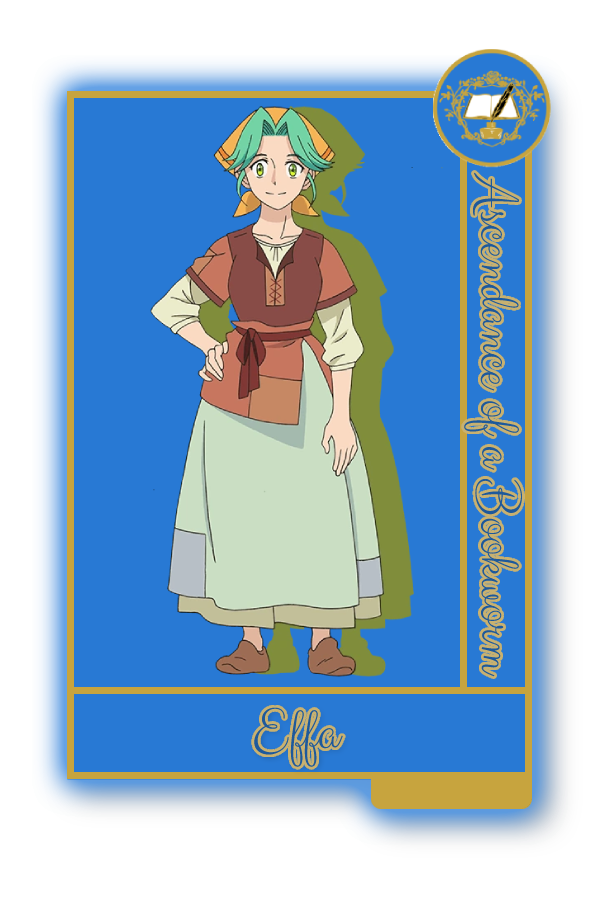
<style>
.page{position:relative;width:600px;height:900px;background:#2879d4}
.page>*{position:absolute;margin:0}
.t1{font:58px "ClickerScript-Regular";color:#1d599c}
.t2{font:60px "ClickerScript-Regular";color:#1d599c}
</style>
<div class="page">
<p class="t1" style="left:464px;top:172px;width:59px;height:505px;rotate:90deg">Ascendance of a Bookworm</p>
<p class="t2" style="left:254px;top:707px;width:89px;height:60px">Effa</p>
</div>
